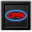
<style>
.page{position:relative;width:32px;height:32px}
.page>*{position:absolute;margin:0}
.t1{font:6.7px "Code-Bold";letter-spacing:0.002em;color:#ff0000;text-transform:uppercase}
</style>
<div class="page">
<p class="t1" style="left:8px;top:12px;width:16px;height:6px">OPEN</p>
</div>
